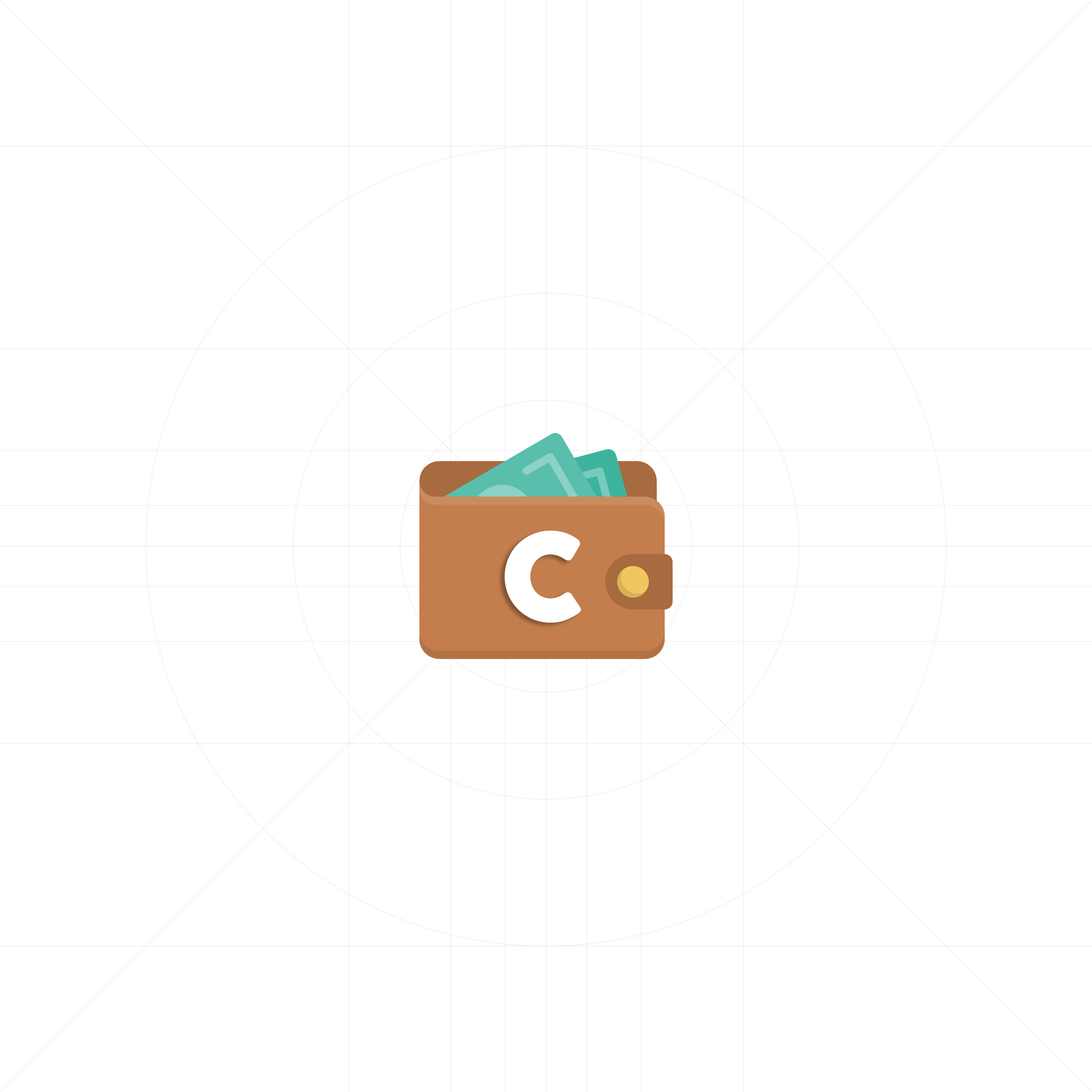
<style>
.page{position:relative;width:1092px;height:1092px;background:#ffffff}
.page>*{position:absolute;margin:0}
.t1{font:140.5px "COCOGOOSE";color:#ffffff}
</style>
<div class="page">
<p class="t1" style="left:504px;top:531px;width:77px;height:92px">c</p>
</div>
